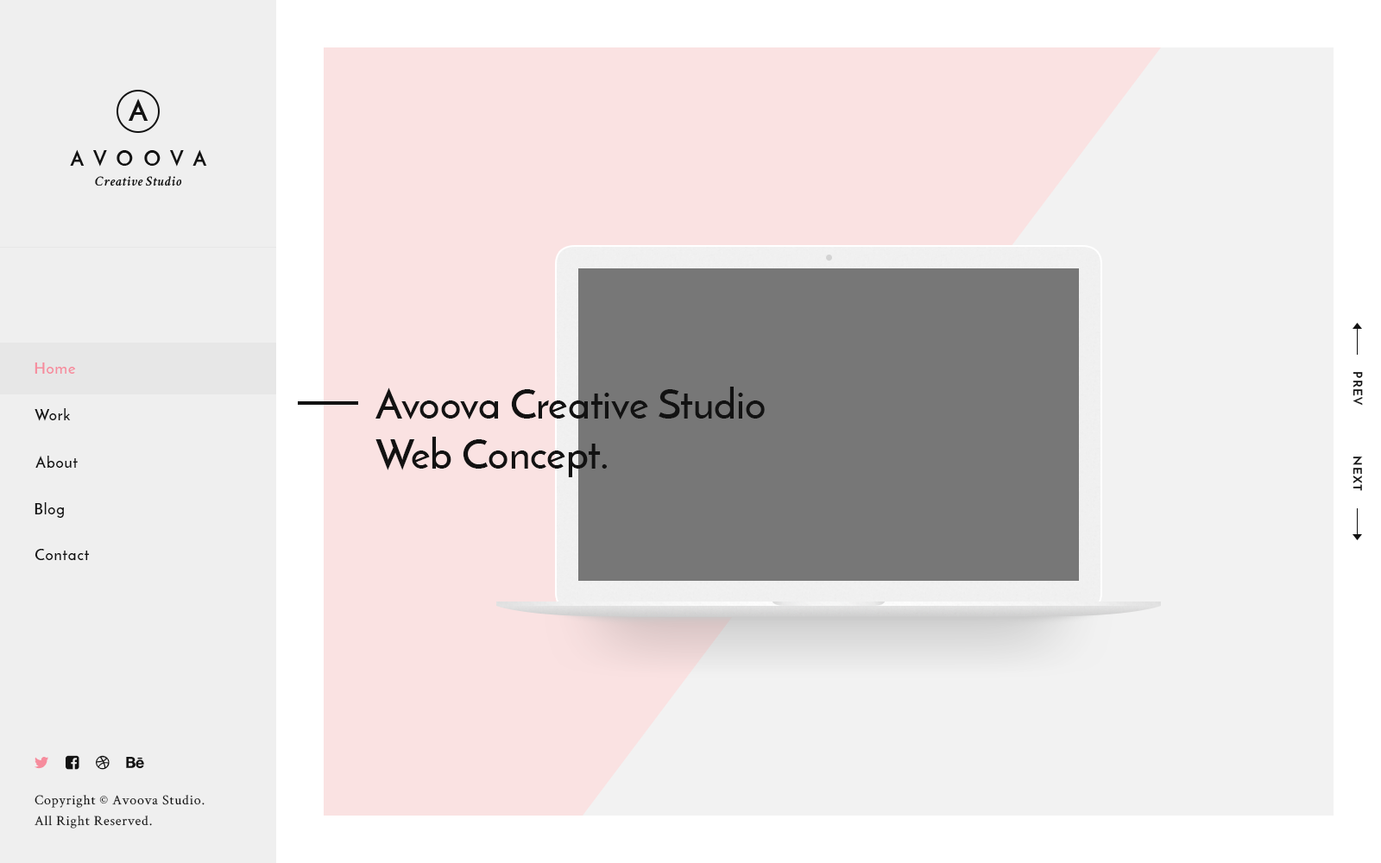
<style>
.page{position:relative;width:1381px;height:863px;background:#fae2e2}
.page>*{position:absolute;margin:0}
.t1{font:15.5px "JosefinSans-SemiBold";letter-spacing:0.05em;color:#f68c9d}
.t2{font:12.1px "JosefinSans-Bold";letter-spacing:0.1em;color:#121212;text-transform:uppercase}
.t3{font:41.4px "JosefinSans-SemiBold";color:#121212}
.t4{font:15.5px "JosefinSans-SemiBold";letter-spacing:0.05em;color:#121212}
.t5{font:11.6px "JosefinSans-Bold";letter-spacing:0.1em;color:#121212;text-transform:uppercase;scale:1.04 1}
.t6{font:13.8px/20.7px "CrimsonText-Roman";letter-spacing:0.05em;color:#121212}
</style>
<div class="page">
<p class="t1" style="left:35px;top:363px;width:41px;height:11px">Home</p>
<p class="t2" style="left:1353px;top:372px;width:10px;height:34px;rotate:90deg">Prev</p>
<p class="t3" style="left:376px;top:387px;width:389px;height:90px">Avoova Creative Studio<br>Web Concept.</p>
<p class="t4" style="left:35px;top:408px;width:36px;height:13px">Work</p>
<p class="t4" style="left:35px;top:456px;width:43px;height:12px">About</p>
<p class="t5" style="left:1353px;top:457px;width:10px;height:34px;rotate:90deg">Next</p>
<p class="t4" style="left:35px;top:502px;width:29px;height:16px">Blog</p>
<p class="t4" style="left:35px;top:549px;width:55px;height:11px">Contact</p>
<p class="t6" style="left:35px;top:795px;width:170px;height:34px">Copyright © Avoova Studio.<br>All Right Reserved.</p>
</div>
